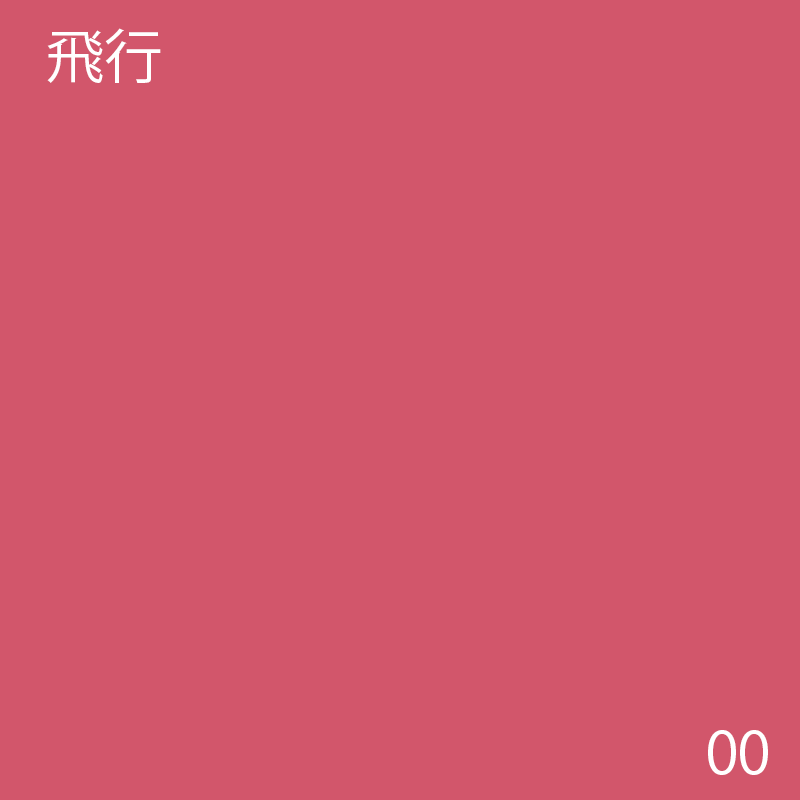
<style>
.page{position:relative;width:800px;height:800px;background:#d2566b}
.page>*{position:absolute;margin:0}
.t1{font:58.3px "KozGoPr6N-Regular";color:#ffffff}
</style>
<div class="page">
<p class="t1" style="left:47px;top:28px;width:114px;height:55px">飛行</p>
<p class="t1" style="left:708px;top:730px;width:60px;height:45px">00</p>
</div>
